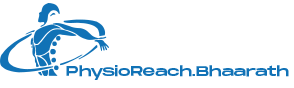
<style>
.page{position:relative;width:294px;height:88px;background:#ffffff}
.page>*{position:absolute;margin:0}
.t1{font:14.2px "MonumentExtended-Regular";color:#1172b6}
</style>
<div class="page">
<p class="t1" style="left:66px;top:65px;width:223px;height:15px">PhysioReach.Bhaarath</p>
</div>
